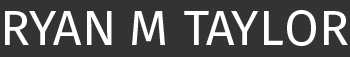
<style>
.page{position:relative;width:350px;height:57px;background:#333333}
.page>*{position:absolute;margin:0}
.t1{font:50px "FiraSans-Regular";color:#ffffff}
</style>
<div class="page">
<p class="t1" style="left:5px;top:10px;width:343px;height:36px">RYAN M TAYLOR Taylor</p>
</div>
